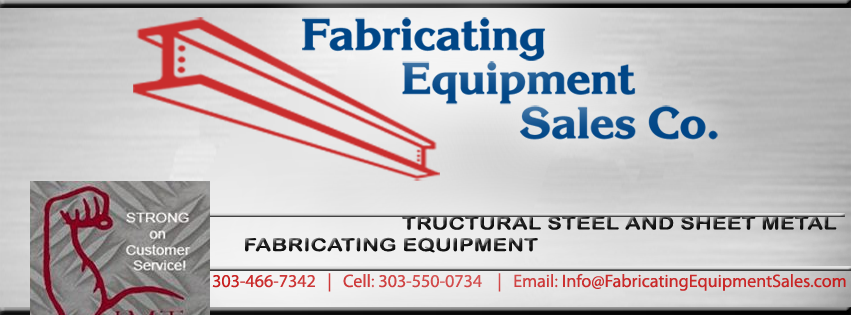
<style>
.page{position:relative;width:851px;height:315px}
.page>*{position:absolute;margin:0}
.t1{font:18px "ArialRoundedMTBold";letter-spacing:0.01em;scale:1.22 1}
.t2{font:18px "MyriadPro-Regular";color:#ca2e2e}
</style>
<div class="page">
<p class="t1" style="left:245px;top:216px;width:592px;height:37px">TRUCTURAL STEEL AND SHEET METAL <br>FABRICATING EQUIPMENT</p>
<p class="t2" style="left:160px;top:273px;width:686px;height:19px">Office: 303-466-7342   |   Cell: 303-550-0734    |   Email: Info@FabricatingEquipmentSales.com</p>
</div>
